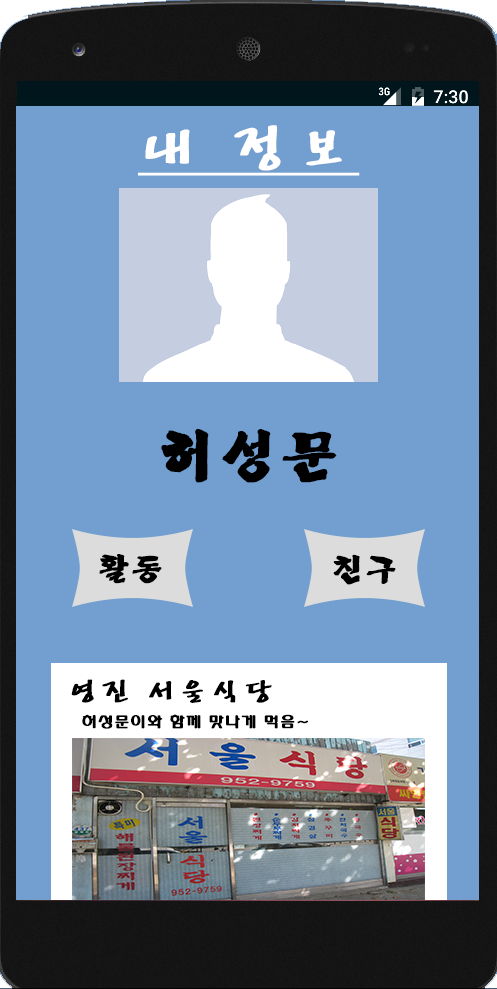
<style>
.page{position:relative;width:497px;height:989px;background:#729fcf}
.page>*{position:absolute;margin:0}
.t1{font:60px "HYbdaM";letter-spacing:0.07em;color:#ffffff;font-weight:bold;text-decoration:underline}
.t2{font:55px "Yj-BACDOO-Bold";letter-spacing:0.07em;color:#000000;font-weight:bold}
.t3{font:30px "Yj-BACDOO-Bold";letter-spacing:0.07em;color:#000000;font-weight:bold}
.t4{font:30px "HYbdaM";letter-spacing:0.07em;color:#000000;font-weight:bold}
.t5{font:15px "HYdnkB";letter-spacing:0.07em;color:#000000;font-weight:bold}
</style>
<div class="page">
<p class="t1" style="left:138px;top:125px;width:222px;height:51px">내 정보</p>
<p class="t2" style="left:161px;top:429px;width:176px;height:54px">허성문</p>
<p class="t3" style="left:99px;top:554px;width:63px;height:30px">활동</p>
<p class="t3" style="left:333px;top:554px;width:63px;height:31px">친구</p>
<p class="t4" style="left:71px;top:679px;width:201px;height:24px">영진 서울식당</p>
<p class="t5" style="left:82px;top:714px;width:226px;height:15px">허성문이와 함께 맛나게 먹음~</p>
</div>
